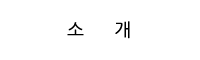
<style>
.page{position:relative;width:200px;height:60px;background:#ffffff}
.page>*{position:absolute;margin:0}
.t1{font:18px "NanumGothic";color:#000000}
</style>
<div class="page">
<p class="t1" style="left:67px;top:21px;width:63px;height:18px">소      개</p>
</div>
